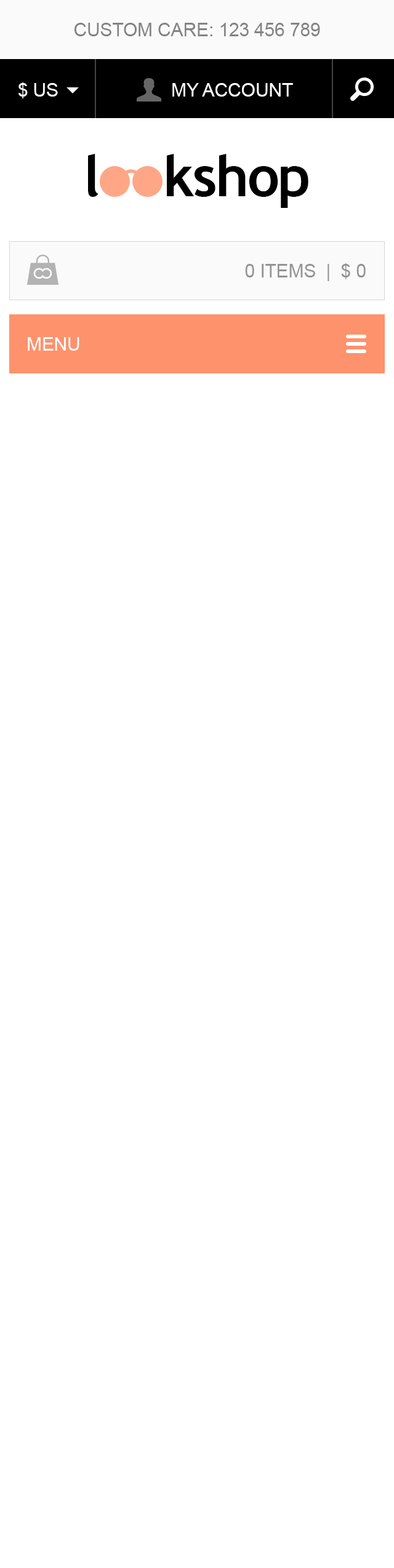
<style>
.page{position:relative;width:394px;height:1568px;background:#ffffff}
.page>*{position:absolute;margin:0}
.t1{font:18.5px "ArialMT";letter-spacing:-0.005em;color:#838383;text-transform:uppercase}
.t2{font:18.5px "ArialMT";letter-spacing:-0.005em;color:#ffffff;text-transform:uppercase}
.t3{font:56.7px "TrebuchetMS-Bold";letter-spacing:-0.025em;color:#000000}
.t4{font:18.5px "ArialMT";letter-spacing:-0.005em;color:#949393;text-transform:uppercase}
</style>
<div class="page">
<p class="t1" style="left:74px;top:23px;width:246px;height:13px">custom care: 123 456 789</p>
<p class="t2" style="left:18px;top:82px;width:40px;height:16px">$ US</p>
<p class="t2" style="left:172px;top:83px;width:121px;height:14px">my account</p>
<p class="t3" style="left:88px;top:154px;width:10px;height:43px">l</p>
<p class="t3" style="left:167px;top:154px;width:141px;height:54px">kshop</p>
<p class="t4" style="left:245px;top:263px;width:120px;height:18px">0 items  |  $ 0</p>
<p class="t2" style="left:28px;top:337px;width:51px;height:14px">menu</p>
</div>
